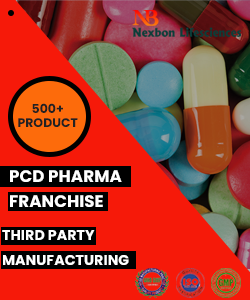
<style>
.page{position:relative;width:250px;height:300px;background:#f61909}
.page>*{position:absolute;margin:0}
.t1{font:12.4px "Poppins-Bold";letter-spacing:0.005em;color:#222222}
.t2{font:16.7px/25px "Poppins-Bold";letter-spacing:0.005em;color:#ffffff}
.t3{font:14.2px/25px "Poppins-Bold";letter-spacing:0.005em;color:#ffffff}
</style>
<div class="page">
<p class="t1" style="left:18px;top:103px;width:60px;height:24px;text-align:center">500+<br>PRODUCT</p>
<p class="t2" style="left:10px;top:170px;width:112px;height:37px">PCD PHARMA <br>FRANCHISE</p>
<p class="t3" style="left:2px;top:230px;width:127px;height:35px">THIRD PARTY<br>MANUFACTURING</p>
</div>
